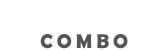
<style>
.page{position:relative;width:165px;height:50px;background:#ffffff}
.page>*{position:absolute;margin:0}
.t1{font:20px "BerlinSansFBDemi-Bold";letter-spacing:0.2em;color:#555555}
</style>
<div class="page">
<p class="t1" style="left:40px;top:34px;width:88px;height:15px">COMBO</p>
</div>
